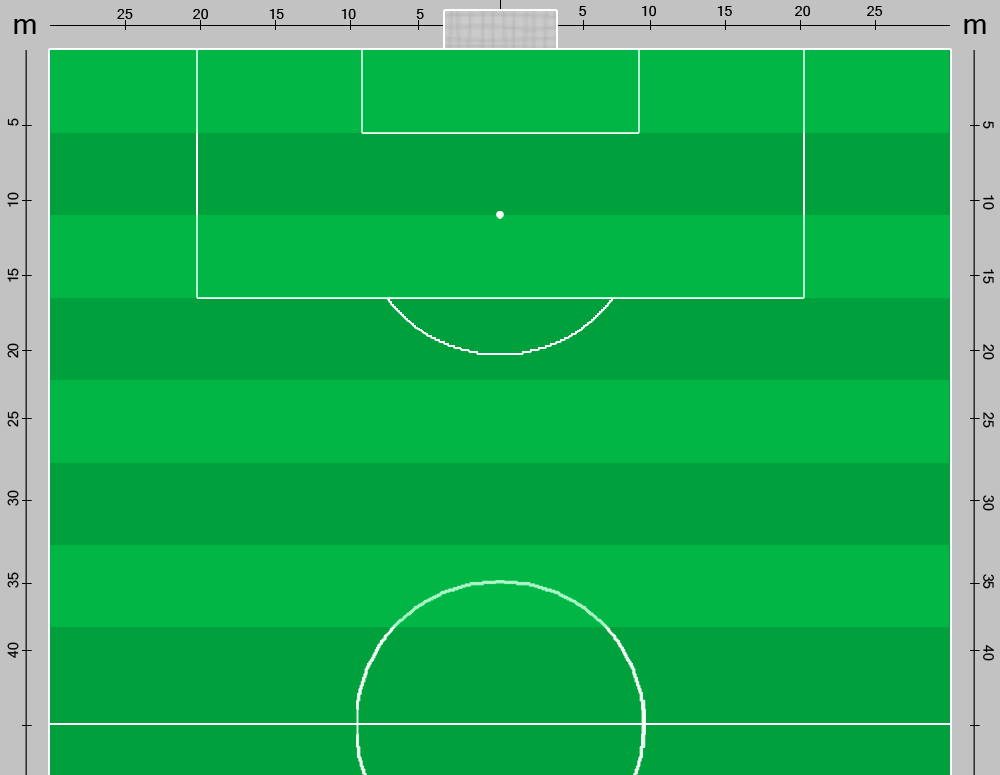
<style>
.page{position:relative;width:1000px;height:775px;background:#00a13d}
.page>*{position:absolute;margin:0}
.t1{font:14px "MicrosoftSansSerif";color:#000000}
.t2{font:30px "MicrosoftSansSerif";color:#000000}
</style>
<div class="page">
<p class="t1" style="left:579px;top:5px;width:304px;height:12px">5         10          15   20    25</p>
<p class="t1" style="left:117px;top:8px;width:307px;height:12px">25    20    15    10      5</p>
<p class="t2" style="left:14px;top:19px;width:22px;height:15px">m</p>
<p class="t2" style="left:964px;top:19px;width:22px;height:15px">m</p>
<p class="t1" style="left:7px;top:118px;width:12px;height:540px;rotate:-90deg">40           35    30        25      20                15                10                  5</p>
<p class="t1" style="left:983px;top:121px;width:11px;height:540px;rotate:90deg">5             10    15       20     25                  30                 35               40</p>
</div>
